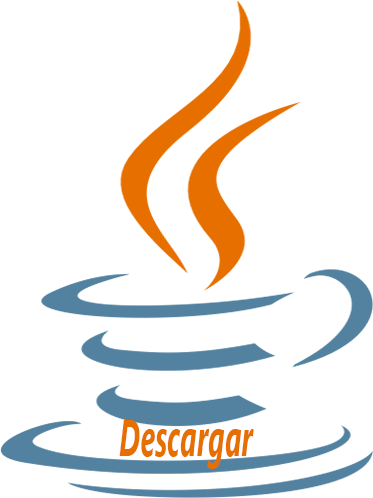
<style>
.page{position:relative;width:373px;height:498px;background:#ffffff}
.page>*{position:absolute;margin:0}
.t1{font:50.7px "SegoeUI-BoldItalic";color:#e76f00;scale:0.56 1}
</style>
<div class="page">
<p class="t1" style="left:119px;top:420px;width:135px;height:49px">Descargar</p>
</div>
